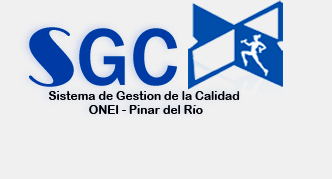
<style>
.page{position:relative;width:332px;height:179px;background:#f0f0f0}
.page>*{position:absolute;margin:0}
.t1{font:12px "ArialRoundedMTBold";color:#05040a}
.t2{font:84.1px "Broadway";color:#023eb5}
.t3{font:84.1px "Broadway";color:#0046aa}
.t4{font:84.1px "FranklinGothic-Medium";color:#0046aa}
</style>
<div class="page">
<p class="t1" style="left:29px;top:27px;width:211px;height:87px"><span class="t2"> </span><span class="t3">S</span><span class="t4">GC<br>               </span>Sistema de Gestion de la Calidad<br>                            ONEI - Pinar del Río</p>
</div>
